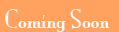
<style>
.page{position:relative;width:119px;height:32px;background:#ffa15f}
.page>*{position:absolute;margin:0}
.t1{font:24px "MonaLisaSolidITCTT";color:#fefefe}
</style>
<div class="page">
<p class="t1" style="left:5px;top:9px;width:105px;height:23px">Coming Soon</p>
</div>
